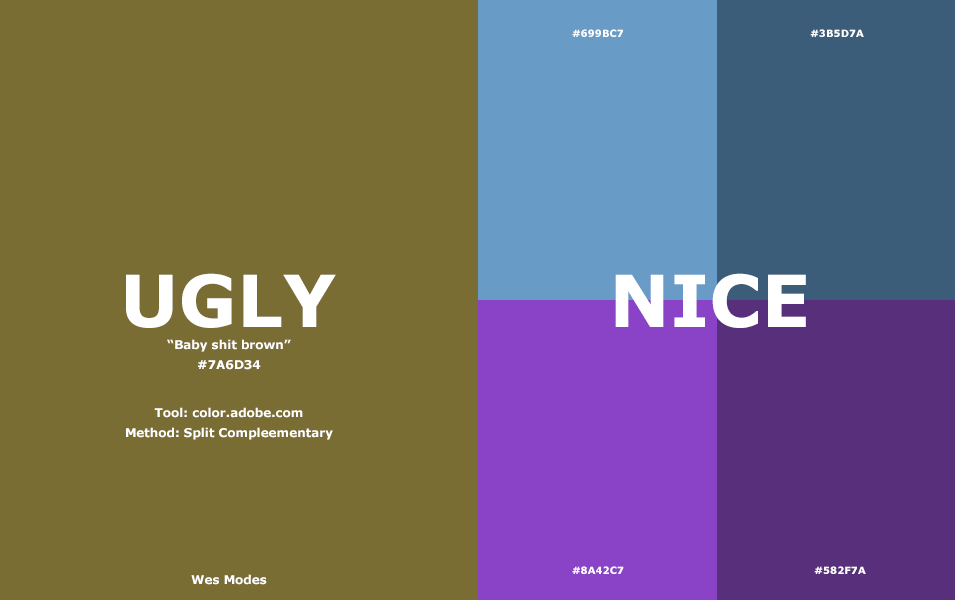
<style>
.page{position:relative;width:955px;height:600px;background:#7a6d34}
.page>*{position:absolute;margin:0}
.t1{font:10px "Verdana-Bold";color:#fefefe}
.t2{font:72px "Verdana-Bold";color:#ffffff}
.t3{font:12px/20px "Verdana-Bold";color:#ffffff}
.t4{font:12px "Verdana-Bold";color:#ffffff}
</style>
<div class="page">
<p class="t1" style="left:572px;top:29px;width:51px;height:8px">#699BC7</p>
<p class="t1" style="left:810px;top:29px;width:54px;height:8px">#3B5D7A</p>
<p class="t2" style="left:126px;top:273px;width:210px;height:55px">UGLY</p>
<p class="t2" style="left:615px;top:273px;width:191px;height:55px">NICE</p>
<p class="t3" style="left:167px;top:339px;width:124px;height:31px;text-align:center">“Baby shit brown”<br>#7A6D34</p>
<p class="t3" style="left:126px;top:407px;width:207px;height:33px;text-align:center">Tool: color.adobe.com<br>Method: Split Compleementary</p>
<p class="t1" style="left:572px;top:566px;width:52px;height:8px">#8A42C7</p>
<p class="t1" style="left:814px;top:566px;width:52px;height:8px">#582F7A</p>
<p class="t4" style="left:191px;top:574px;width:76px;height:11px">Wes Modes</p>
</div>
